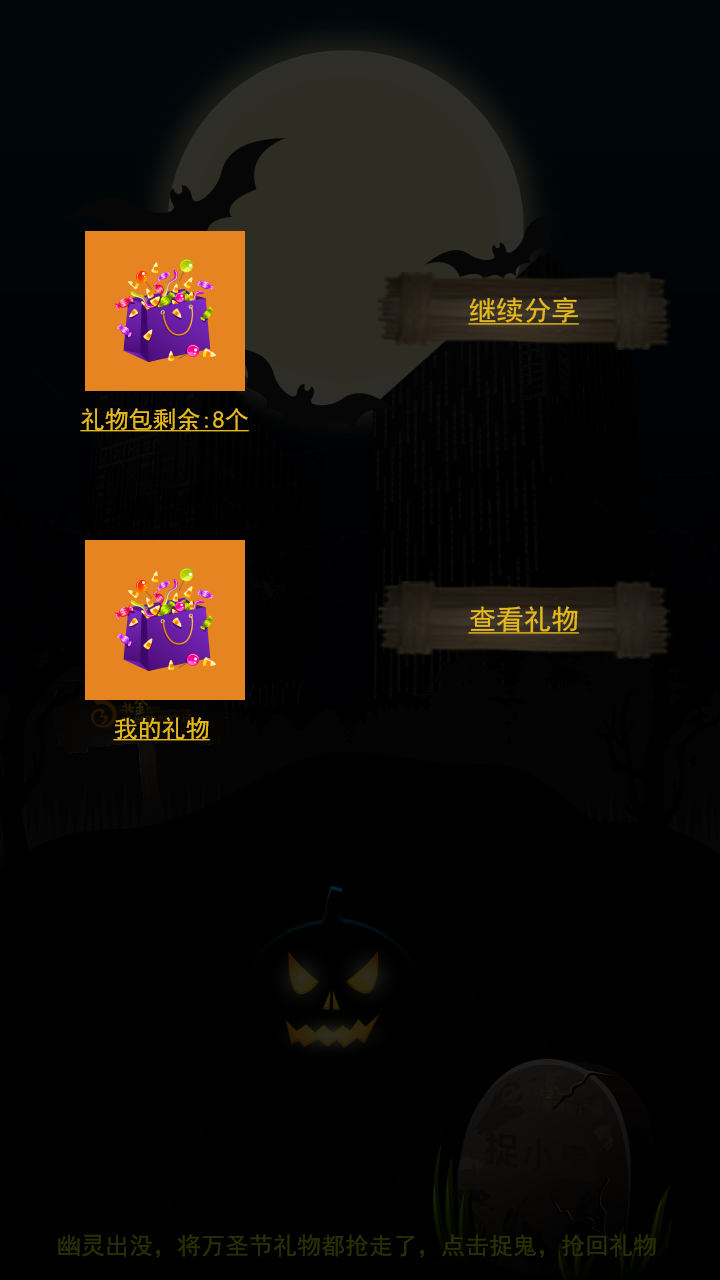
<style>
.page{position:relative;width:720px;height:1280px;background:#000000}
.page>*{position:absolute;margin:0}
.t1{font:27.6px "SimHei";color:#e5b91d;text-decoration:underline}
.t2{font:24px "SimHei";color:#e5b91d;text-decoration:underline}
</style>
<div class="page">
<p class="t1" style="left:468px;top:297px;width:111px;height:28px">继续分享</p>
<p class="t2" style="left:80px;top:408px;width:169px;height:24px">礼物包剩余:8个</p>
<p class="t1" style="left:468px;top:606px;width:111px;height:28px">查看礼物</p>
<p class="t2" style="left:113px;top:717px;width:97px;height:24px">我的礼物</p>
</div>
